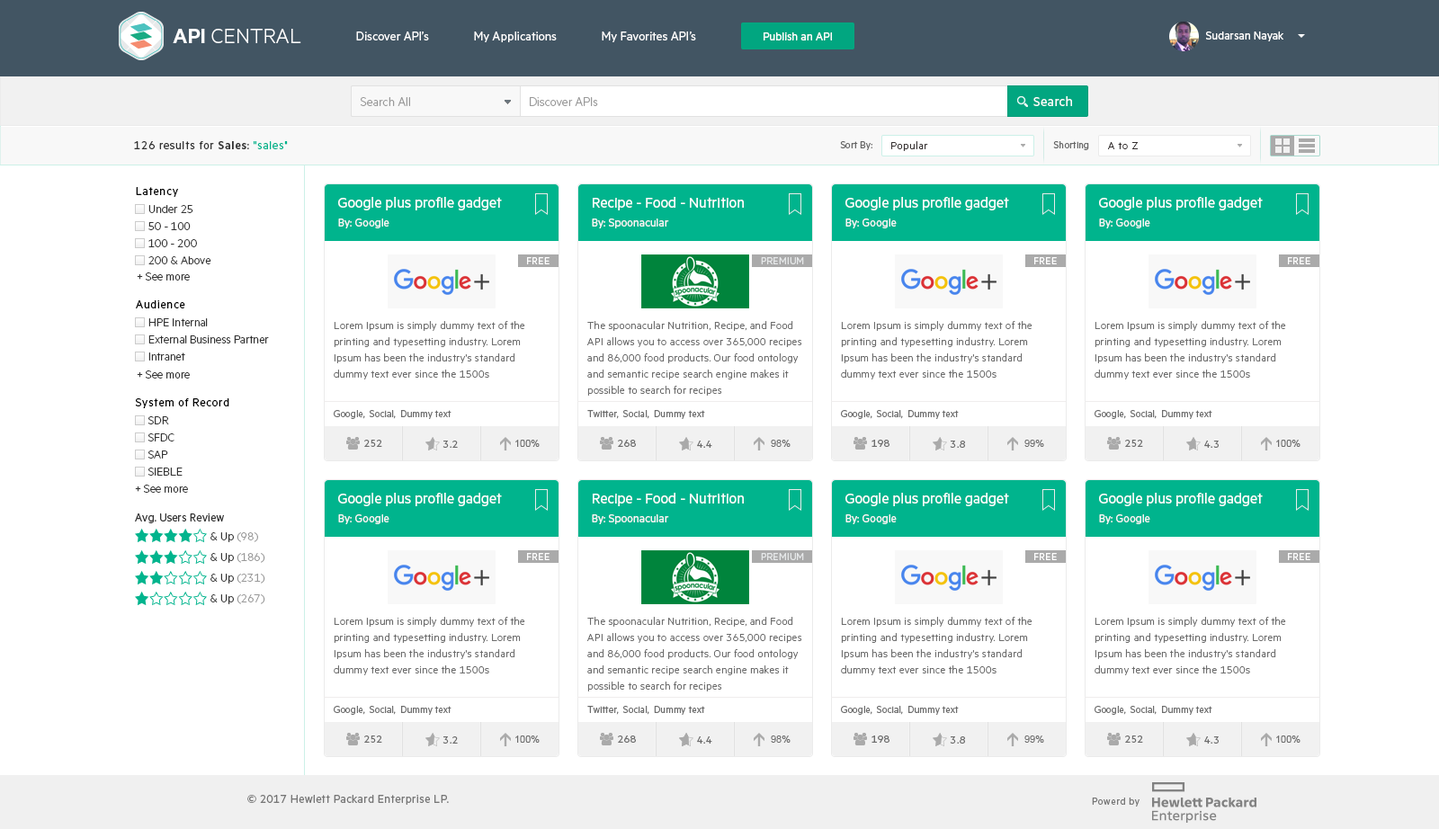
<style>
.page{position:relative;width:1439px;height:829px;background:#ffffff}
.page>*{position:absolute;margin:0}
.t1{font:23.4px "MetricHPE-Light";color:#ffffff;text-transform:uppercase}
.t2{font:23.4px "MetricHPE-Semibold";color:#ffffff;text-transform:uppercase}
.t3{font:13.5px "MetricHPE-Regular";color:#ffffff}
.t4{font:12.6px "MetricHPE-Regular";color:#ffffff}
.t5{font:13.5px "MetricHPE-Light";color:#999999}
.t6{font:14.4px "MetricHPE-Regular";letter-spacing:0.025em;color:#ffffff}
.t7{font:12.6px "MetricHPE-Regular";letter-spacing:0.05em;color:#333333}
.t8{font:12.6px "MetricHPE-Semibold";letter-spacing:0.05em;color:#333333}
.t9{font:12.6px "MetricHPE-Regular";letter-spacing:0.05em;color:#00b48d}
.t10{font:10.8px "MetricHPE-Regular";color:#666666}
.t11{font:11.7px "MetricHPE-Light";letter-spacing:0.05em;color:#353030}
.t12{font:12.6px "MetricHPE-Regular";letter-spacing:0.05em;color:#000000}
.t13{font:16.2px/18.9px "MetricHPE-Regular";color:#ffffff}
.t14{font:12.6px/18.9px "MetricHPE-Regular";color:#f5f5f5}
.t15{font:12.6px/17.1px "MetricHPE-Light";color:#323232}
.t16{font:10.8px "MetricHPE-Regular";letter-spacing:0.025em;color:#ffffff;text-transform:uppercase}
.t17{font:10.8px "MetricHPE-Regular";letter-spacing:0.025em;color:#e6e8e9;text-transform:uppercase}
.t18{font:12.6px "MetricHPE-Light";color:#323232}
.t19{font:11.7px/16.2px "MetricHPE-Light";letter-spacing:0.025em;color:#6d6d6d}
.t20{font:10.8px "MetricHPE-Regular";color:#6d6d6d}
.t21{font:11.7px "MetricHPE-Regular";color:#6d6d6d}
.t22{font:11.7px "MetricHPE-Regular";letter-spacing:0.05em;color:#6d6d6d}
.t23{font:9.9px "ArialMT";color:#6d6d6d}
.t24{font:12.6px "MetricHPE-Regular";color:#333333}
.t25{font:12.6px/20.7px "MetricHPE-Light";color:#999999}
.t26{font:12.6px/20.7px "MetricHPE-Light";color:#323232}
.t27{font:12.6px "MetricHPE-Regular";letter-spacing:0.025em;color:#767676}
.t28{font:10.8px "MetricHPE-Regular";letter-spacing:0.05em;color:#767676}
</style>
<div class="page">
<p class="t1" style="left:173px;top:29px;width:128px;height:14px"><span class="t2">API </span>Central</p>
<p class="t3" style="left:356px;top:31px;width:340px;height:11px">Discover API’s               My Applications               My Favorites API’s</p>
<p class="t4" style="left:763px;top:32px;width:69px;height:8px">Publish an API</p>
<p class="t4" style="left:1206px;top:31px;width:77px;height:10px">Sudarsan Nayak</p>
<p class="t5" style="left:361px;top:97px;width:49px;height:9px">Search All</p>
<p class="t5" style="left:530px;top:97px;width:68px;height:9px">Discover APIs</p>
<p class="t6" style="left:1033px;top:96px;width:39px;height:10px">Search</p>
<p class="t7" style="left:134px;top:141px;width:154px;height:8px">126 results for <span class="t8">Sales</span>: <span class="t9">"sales"</span></p>
<p class="t10" style="left:840px;top:141px;width:32px;height:9px">Sort By:</p>
<p class="t11" style="left:891px;top:141px;width:37px;height:10px">Popular</p>
<p class="t10" style="left:1053px;top:141px;width:36px;height:9px">Shorting</p>
<p class="t11" style="left:1108px;top:142px;width:30px;height:7px">A to Z</p>
<p class="t12" style="left:136px;top:187px;width:42px;height:10px">Latency</p>
<p class="t13" style="left:338px;top:197px;width:164px;height:31px">Google plus profile gadget<br><span class="t14">By: Google</span></p>
<p class="t13" style="left:592px;top:197px;width:152px;height:31px">Recipe - Food - Nutrition<br><span class="t14">By: Spoonacular</span></p>
<p class="t13" style="left:845px;top:197px;width:164px;height:31px">Google plus profile gadget<br><span class="t14">By: Google</span></p>
<p class="t13" style="left:1099px;top:197px;width:163px;height:31px">Google plus profile gadget<br><span class="t14">By: Google</span></p>
<p class="t15" style="left:148px;top:205px;width:63px;height:59px">Under 25<br>50 - 100<br>100 - 200<br>200 &amp; Above</p>
<p class="t16" style="left:527px;top:257px;width:22px;height:7px">Free</p>
<p class="t17" style="left:761px;top:257px;width:43px;height:7px">Premium</p>
<p class="t16" style="left:1034px;top:257px;width:22px;height:7px">Free</p>
<p class="t16" style="left:1287px;top:257px;width:23px;height:7px">Free</p>
<p class="t18" style="left:137px;top:272px;width:53px;height:9px">+ See more</p>
<p class="t12" style="left:136px;top:300px;width:49px;height:8px">Audience</p>
<p class="t15" style="left:148px;top:318px;width:121px;height:43px">HPE Internal<br>External Business Partner<br>Intranet</p>
<p class="t19" style="left:334px;top:321px;width:191px;height:58px">Lorem Ipsum is simply dummy text of the printing and typesetting industry. Lorem Ipsum has been the industry's standard dummy text ever since the 1500s</p>
<p class="t19" style="left:587px;top:321px;width:215px;height:75px">The spoonacular Nutrition, Recipe, and Food API allows you to access over 365,000 recipes and 86,000 food products. Our food ontology and semantic recipe search engine makes it possible to search for recipes</p>
<p class="t19" style="left:841px;top:321px;width:191px;height:58px">Lorem Ipsum is simply dummy text of the printing and typesetting industry. Lorem Ipsum has been the industry's standard dummy text ever since the 1500s</p>
<p class="t19" style="left:1094px;top:321px;width:192px;height:58px">Lorem Ipsum is simply dummy text of the printing and typesetting industry. Lorem Ipsum has been the industry's standard dummy text ever since the 1500s</p>
<p class="t18" style="left:137px;top:370px;width:53px;height:9px">+ See more</p>
<p class="t12" style="left:136px;top:398px;width:93px;height:10px">System of Record</p>
<p class="t20" style="left:334px;top:410px;width:117px;height:9px">Google,  Social,  Dummy text</p>
<p class="t20" style="left:587px;top:410px;width:118px;height:9px">Twitter,  Social,  Dummy text</p>
<p class="t20" style="left:841px;top:410px;width:117px;height:9px">Google,  Social,  Dummy text</p>
<p class="t20" style="left:1094px;top:410px;width:118px;height:9px">Google,  Social,  Dummy text</p>
<p class="t15" style="left:148px;top:416px;width:35px;height:60px">SDR<br>SFDC<br>SAP<br>SIEBLE</p>
<p class="t21" style="left:364px;top:440px;width:18px;height:7px">252</p>
<p class="t22" style="left:442px;top:441px;width:16px;height:7px">3.2</p>
<p class="t23" style="left:515px;top:440px;width:24px;height:7px">100%</p>
<p class="t21" style="left:618px;top:440px;width:18px;height:7px">268</p>
<p class="t22" style="left:697px;top:441px;width:15px;height:7px">4.4</p>
<p class="t23" style="left:770px;top:440px;width:20px;height:7px">98%</p>
<p class="t21" style="left:871px;top:440px;width:18px;height:7px">198</p>
<p class="t22" style="left:949px;top:441px;width:16px;height:7px">3.8</p>
<p class="t23" style="left:1024px;top:440px;width:20px;height:7px">99%</p>
<p class="t21" style="left:1125px;top:440px;width:18px;height:7px">252</p>
<p class="t22" style="left:1204px;top:441px;width:14px;height:7px">4.3</p>
<p class="t23" style="left:1276px;top:440px;width:24px;height:7px">100%</p>
<p class="t18" style="left:135px;top:485px;width:53px;height:8px">+ See more</p>
<p class="t13" style="left:338px;top:493px;width:164px;height:31px">Google plus profile gadget<br><span class="t14">By: Google</span></p>
<p class="t13" style="left:592px;top:493px;width:152px;height:31px">Recipe - Food - Nutrition<br><span class="t14">By: Spoonacular</span></p>
<p class="t13" style="left:845px;top:493px;width:164px;height:31px">Google plus profile gadget<br><span class="t14">By: Google</span></p>
<p class="t13" style="left:1099px;top:493px;width:163px;height:31px">Google plus profile gadget<br><span class="t14">By: Google</span></p>
<p class="t24" style="left:135px;top:513px;width:89px;height:10px">Avg. Users Review</p>
<p class="t25" style="left:210px;top:532px;width:55px;height:72px"><span class="t26">&amp; Up </span>(98)<br><span class="t26">&amp; Up </span>(186)<br><span class="t26">&amp; Up </span>(231)<br><span class="t26">&amp; Up </span>(267)</p>
<p class="t16" style="left:527px;top:553px;width:22px;height:7px">Free</p>
<p class="t17" style="left:761px;top:553px;width:43px;height:7px">Premium</p>
<p class="t16" style="left:1034px;top:553px;width:22px;height:7px">Free</p>
<p class="t16" style="left:1287px;top:553px;width:23px;height:7px">Free</p>
<p class="t19" style="left:334px;top:617px;width:191px;height:58px">Lorem Ipsum is simply dummy text of the printing and typesetting industry. Lorem Ipsum has been the industry's standard dummy text ever since the 1500s</p>
<p class="t19" style="left:587px;top:617px;width:215px;height:74px">The spoonacular Nutrition, Recipe, and Food API allows you to access over 365,000 recipes and 86,000 food products. Our food ontology and semantic recipe search engine makes it possible to search for recipes</p>
<p class="t19" style="left:841px;top:617px;width:191px;height:58px">Lorem Ipsum is simply dummy text of the printing and typesetting industry. Lorem Ipsum has been the industry's standard dummy text ever since the 1500s</p>
<p class="t19" style="left:1094px;top:617px;width:192px;height:58px">Lorem Ipsum is simply dummy text of the printing and typesetting industry. Lorem Ipsum has been the industry's standard dummy text ever since the 1500s</p>
<p class="t20" style="left:334px;top:706px;width:117px;height:9px">Google,  Social,  Dummy text</p>
<p class="t20" style="left:587px;top:706px;width:118px;height:9px">Twitter,  Social,  Dummy text</p>
<p class="t20" style="left:841px;top:706px;width:117px;height:9px">Google,  Social,  Dummy text</p>
<p class="t20" style="left:1094px;top:706px;width:118px;height:9px">Google,  Social,  Dummy text</p>
<p class="t21" style="left:364px;top:735px;width:18px;height:8px">252</p>
<p class="t22" style="left:442px;top:736px;width:16px;height:8px">3.2</p>
<p class="t23" style="left:515px;top:735px;width:24px;height:8px">100%</p>
<p class="t21" style="left:618px;top:735px;width:18px;height:8px">268</p>
<p class="t22" style="left:697px;top:736px;width:15px;height:8px">4.4</p>
<p class="t23" style="left:770px;top:735px;width:20px;height:8px">98%</p>
<p class="t21" style="left:871px;top:735px;width:18px;height:8px">198</p>
<p class="t22" style="left:949px;top:736px;width:16px;height:8px">3.8</p>
<p class="t23" style="left:1024px;top:735px;width:20px;height:8px">99%</p>
<p class="t21" style="left:1125px;top:735px;width:18px;height:8px">252</p>
<p class="t22" style="left:1204px;top:736px;width:14px;height:8px">4.3</p>
<p class="t23" style="left:1276px;top:735px;width:24px;height:8px">100%</p>
<p class="t27" style="left:247px;top:795px;width:202px;height:10px">© 2017 Hewlett Packard Enterprise LP.</p>
<p class="t28" style="left:1091px;top:797px;width:48px;height:9px">Powerd by</p>
</div>
